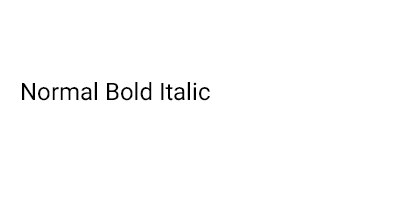
<style>
.page{position:relative;width:400px;height:200px;background:#ffffff}
.page>*{position:absolute;margin:0}
.t1{font:24px "Roboto-Regular";color:#000000}
</style>
<div class="page">
<p class="t1" style="left:22px;top:82px;width:188px;height:19px">Normal Bold Italic</p>
</div>
